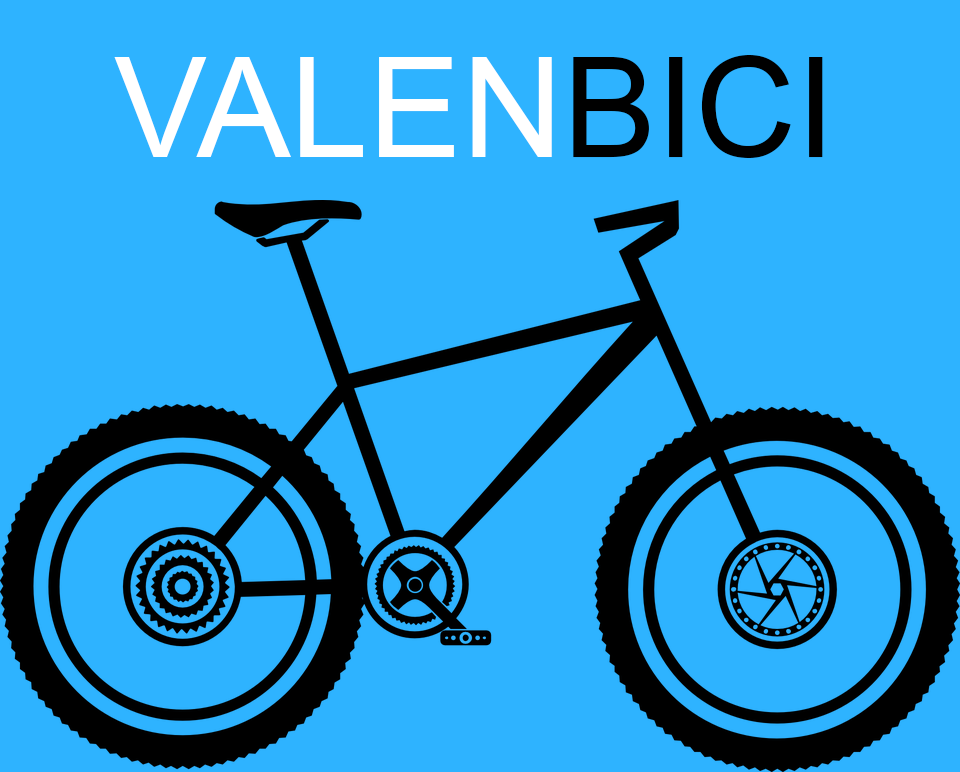
<style>
.page{position:relative;width:960px;height:772px;background:#2eb3ff}
.page>*{position:absolute;margin:0}
.t1{font:140px "ArialMT";color:#ffffff}
.t2{font:140px "ArialMT";color:#000000}
</style>
<div class="page">
<p class="t1" style="left:114px;top:55px;width:709px;height:103px">VALEN<span class="t2">BICI</span></p>
</div>
